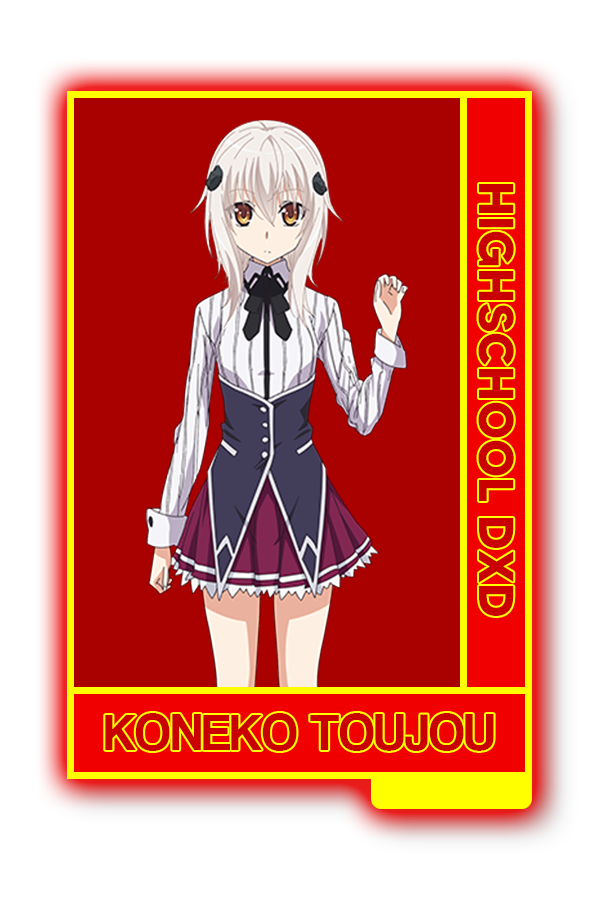
<style>
.page{position:relative;width:600px;height:900px;background:#a90000}
.page>*{position:absolute;margin:0}
.t1{font:48.8px "MADETOMMY-Bold";color:#ca0000}
.t2{font:52.7px "CoolveticaRg-Regular";color:#ca0000}
</style>
<div class="page">
<p class="t1" style="left:478px;top:184px;width:36px;height:432px;rotate:90deg">HIGHSCHOOL DXD</p>
<p class="t2" style="left:105px;top:713px;width:389px;height:38px">KONEKO TOUJOU</p>
</div>
